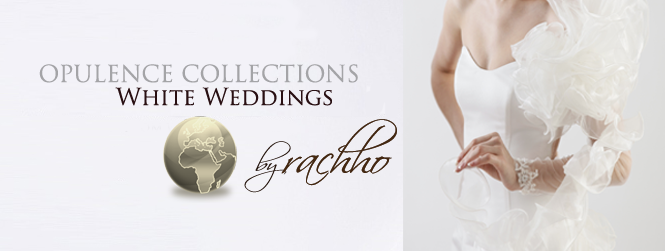
<style>
.page{position:relative;width:665px;height:251px}
.page>*{position:absolute;margin:0}
.t1{font:22.9px "TrajanPro-Regular";color:#a4a4a7}
.t2{font:22.9px "TrajanPro-Regular";color:#280f12}
.t3{font:47.6px "ScriptinaPro";color:#432710;scale:1.05 1}
.t4{font:24.3px/1102.9px "ScriptinaPro";color:#25150d;scale:1.11 1}
</style>
<div class="page">
<p class="t1" style="left:39px;top:64px;width:319px;height:19px">OPULENCE COLLECTIONS</p>
<p class="t2" style="left:115px;top:87px;width:217px;height:19px">White Weddings</p>
<p class="t3" style="left:281px;top:119px;width:116px;height:67px">rachho</p>
<p class="t3" style="left:281px;top:119px;width:116px;height:67px">rachho</p>
<p class="t3" style="left:281px;top:119px;width:116px;height:67px">rachho</p>
<p class="t4" style="left:244px;top:141px;width:47px;height:52px;text-align:center">by</p>
</div>
